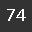
<style>
.page{position:relative;width:32px;height:32px;background:#333333}
.page>*{position:absolute;margin:0}
.t1{font:17.8px "MyriadPro-Regular";color:#ffffff;scale:1.12 1}
</style>
<div class="page">
<p class="t1" style="left:7px;top:9px;width:19px;height:12px">74</p>
</div>
